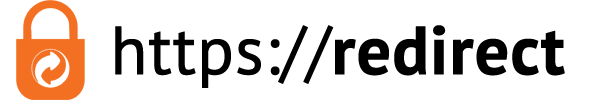
<style>
.page{position:relative;width:590px;height:100px;background:#ffffff}
.page>*{position:absolute;margin:0}
.t1{font:68px "PTSans-Regular";letter-spacing:-0.01em;color:#000000;font-weight:bold}
.t2{font:68px "PTSans-Bold";letter-spacing:-0.01em;color:#000000;font-weight:bold}
</style>
<div class="page">
<p class="t1" style="left:115px;top:25px;width:450px;height:63px">https://<span class="t2">redirect</span></p>
</div>
